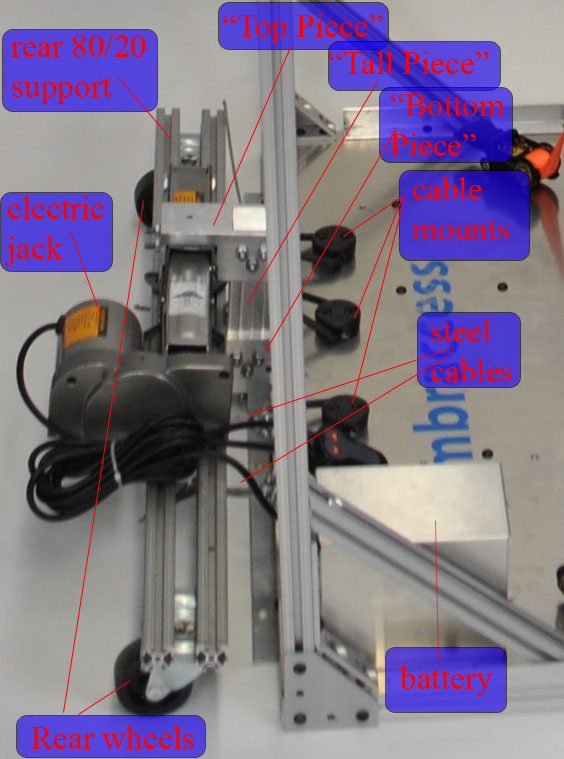
<style>
.page{position:relative;width:564px;height:759px}
.page>*{position:absolute;margin:0}
.t1{font:33.3px "TimesNewRomanPSMT";color:#ff0000}
</style>
<div class="page">
<p class="t1" style="left:223px;top:14px;width:160px;height:30px">“Top Piece”</p>
<p class="t1" style="left:11px;top:34px;width:135px;height:70px">rear 80/20 <br>support</p>
<p class="t1" style="left:329px;top:51px;width:160px;height:23px">“Tall Piece”</p>
<p class="t1" style="left:390px;top:94px;width:115px;height:62px">“Bottom <br>Piece”</p>
<p class="t1" style="left:412px;top:177px;width:97px;height:63px">cable <br>mounts</p>
<p class="t1" style="left:4px;top:196px;width:100px;height:70px">electric<br>jack</p>
<p class="t1" style="left:431px;top:319px;width:81px;height:63px">steel <br>cables</p>
<p class="t1" style="left:399px;top:666px;width:94px;height:30px">battery</p>
<p class="t1" style="left:31px;top:726px;width:163px;height:23px">Rear wheels</p>
</div>
